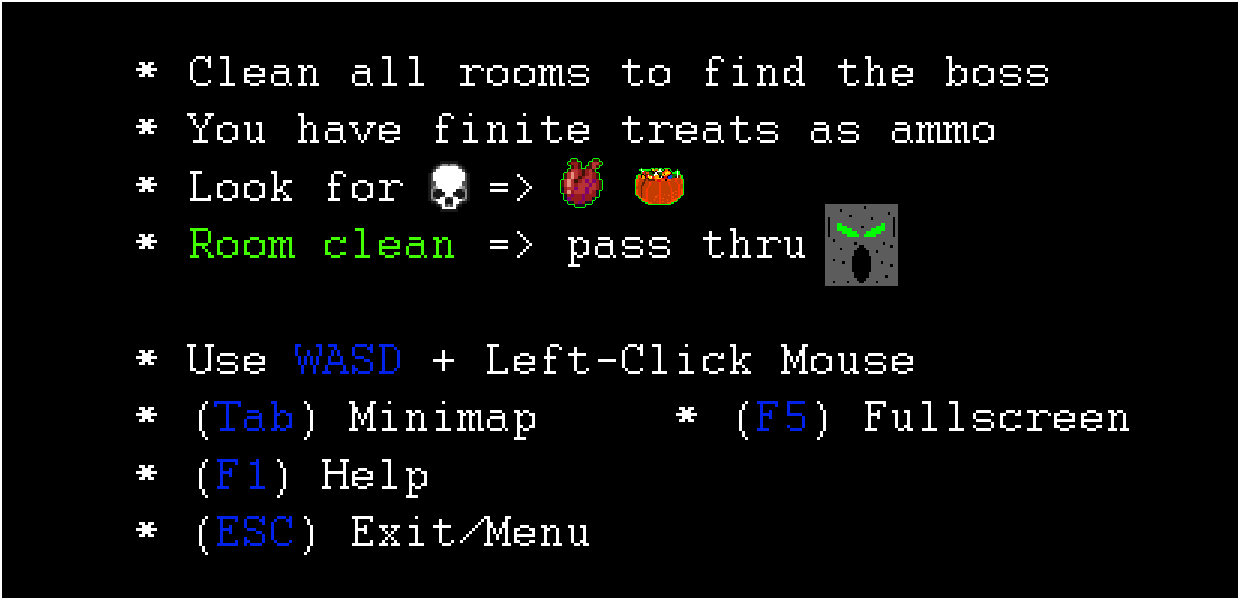
<style>
.page{position:relative;width:1240px;height:600px;background:#000000}
.page>*{position:absolute;margin:0}
.t1{font:48px "Courier";color:#ffffff}
.t2{font:48px "Courier";color:#42ff00}
.t3{font:48px "Courier";color:#0021e9}
</style>
<div class="page">
<p class="t1" style="left:136px;top:56px;width:993px;height:499px">* Clean all rooms to find the boss<br>* You have finite treats as ammo<br>* Look for   =&gt; <br>* <span class="t2">Room clean</span> =&gt; pass thru<br><br>* Use <span class="t3">WASD </span>+ Left-Click Mouse<br>* (<span class="t3">Tab</span>) Minimap     * (<span class="t3">F5</span>) Fullscreen<br>* (<span class="t3">F1</span>) Help<br>* (<span class="t3">ESC</span>) Exit/Menu</p>
</div>
